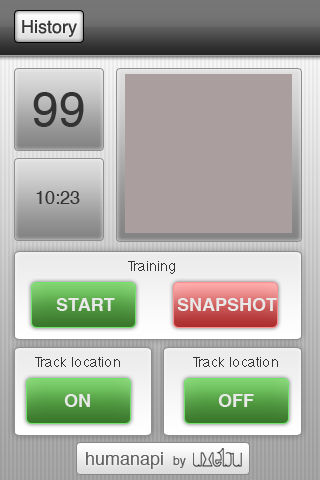
<style>
.page{position:relative;width:320px;height:480px}
.page>*{position:absolute;margin:0}
.t1{font:18px "Helvetica";color:#333333}
.t2{font:48px "Helvetica";color:#333333}
.t3{font:14px "Helvetica";color:#333333}
.t4{font:18px "Helvetica-Bold";color:#e8e8e8}
.t5{font:18px "Helvetica";color:#5b5b5b}
.t6{font:12px "Helvetica";color:#5b5b5b}
</style>
<div class="page">
<p class="t1" style="left:22px;top:20px;width:55px;height:17px">History</p>
<p class="t2" style="left:33px;top:92px;width:51px;height:35px">99</p>
<p class="t1" style="left:36px;top:191px;width:44px;height:13px">10:23</p>
<p class="t3" style="left:128px;top:261px;width:47px;height:13px">Training</p>
<p class="t4" style="left:56px;top:298px;width:59px;height:13px">START</p>
<p class="t4" style="left:177px;top:298px;width:100px;height:13px">SNAPSHOT</p>
<p class="t3" style="left:35px;top:357px;width:85px;height:10px">Track location</p>
<p class="t3" style="left:193px;top:357px;width:85px;height:10px">Track location</p>
<p class="t4" style="left:64px;top:394px;width:26px;height:13px">ON</p>
<p class="t4" style="left:218px;top:394px;width:36px;height:13px">OFF</p>
<p class="t5" style="left:86px;top:452px;width:77px;height:17px">humanapi</p>
<p class="t6" style="left:173px;top:456px;width:13px;height:12px">by</p>
</div>
